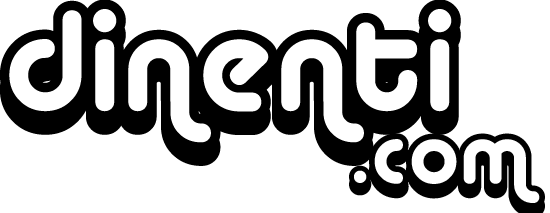
<style>
.page{position:relative;width:550px;height:213px;background:#ffffff}
.page>*{position:absolute;margin:0}
.t1{font:141.7px "AlbaSuper";color:#000000}
</style>
<div class="page">
<p class="t1" style="left:0px;top:0px;width:461px;height:166px">dinenti</p>
</div>
